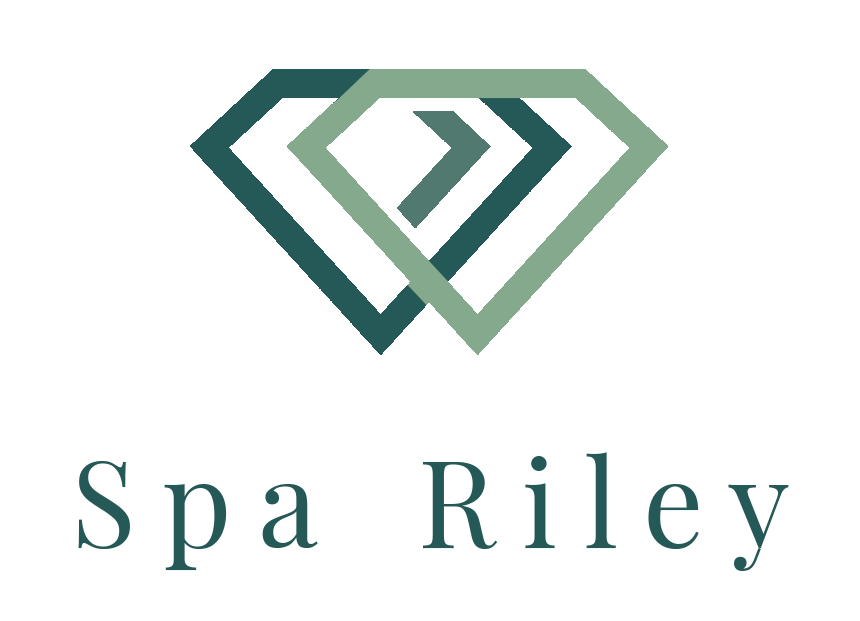
<style>
.page{position:relative;width:860px;height:621px;background:#ffffff}
.page>*{position:absolute;margin:0}
.t1{font:120px "PlayfairDisplay-Regular";letter-spacing:0.22em;color:#255957}
</style>
<div class="page">
<p class="t1" style="left:78px;top:452px;width:711px;height:119px">Spa Riley</p>
</div>
